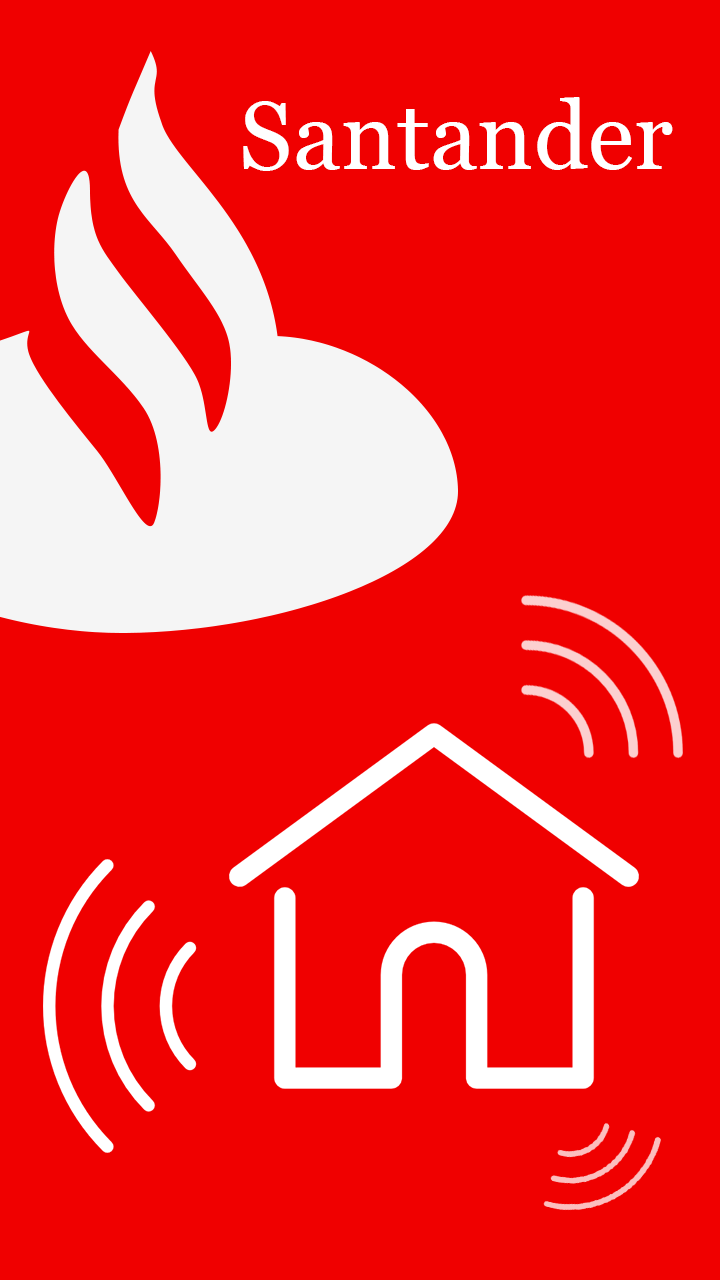
<style>
.page{position:relative;width:720px;height:1280px;background:#f00000}
.page>*{position:absolute;margin:0}
.t1{font:95px "Georgia";color:#ffffff}
</style>
<div class="page">
<p class="t1" style="left:243px;top:97px;width:430px;height:74px">Santander</p>
</div>
